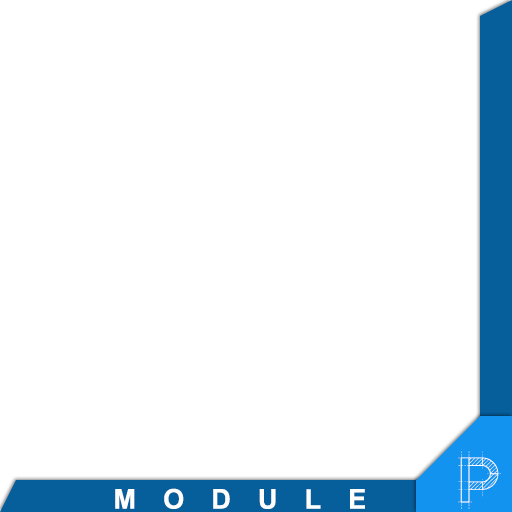
<style>
.page{position:relative;width:512px;height:512px;background:#ffffff}
.page>*{position:absolute;margin:0}
.t1{font:72.2px "RollandinEmilie";color:#ffffff}
.t2{font:27.1px "Arial-BoldMT";letter-spacing:1em;color:#ffffff}
</style>
<div class="page">
<p class="t1" style="left:458px;top:451px;width:43px;height:58px">P</p>
<p class="t2" style="left:115px;top:488px;width:250px;height:21px">MODULE</p>
</div>
